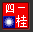
<style>
.page{position:relative;width:33px;height:32px;background:#f20000}
.page>*{position:absolute;margin:0}
.t1{font:10.4px "SimSun";color:#ffffff}
.t2{font:11.7px "SimSun";color:#ffffff}
</style>
<div class="page">
<p class="t1" style="left:6px;top:4px;width:19px;height:9px">四一</p>
<p class="t2" style="left:16px;top:15px;width:11px;height:12px">桂</p>
</div>
